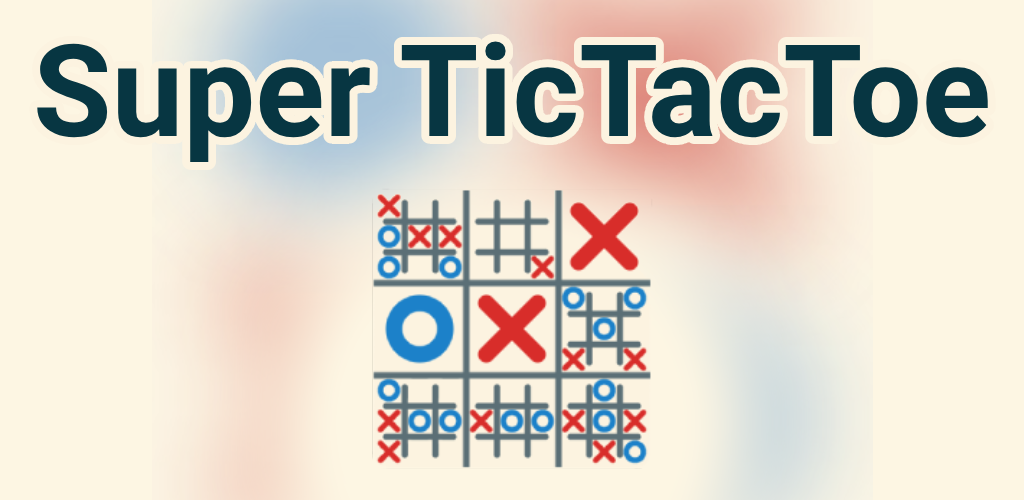
<style>
.page{position:relative;width:1024px;height:500px;background:#fdf6e3}
.page>*{position:absolute;margin:0}
.t1{font:128px "Roboto-Bold";color:#073642}
</style>
<div class="page">
<p class="t1" style="left:37px;top:41px;width:951px;height:121px">Super TicTacToe</p>
</div>
